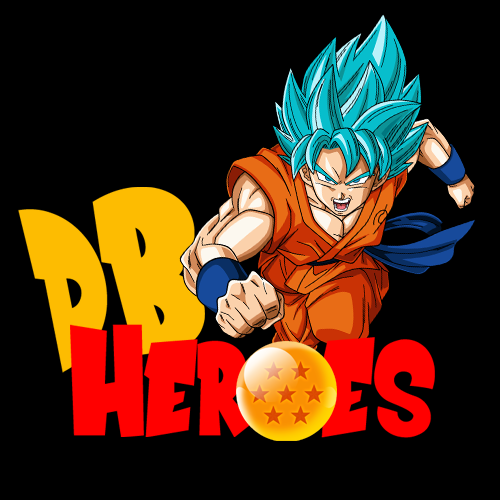
<style>
.page{position:relative;width:500px;height:500px;background:#000000}
.page>*{position:absolute;margin:0}
.t1{font:238.3px "SaiyanSans";color:#fdbc01}
.t2{font:160.2px "SaiyanSans";color:#ff0000}
.t3{font:163.7px "SaiyanSans";color:#ff0000}
</style>
<div class="page">
<p class="t1" style="left:18px;top:187px;width:187px;height:186px;rotate:-11deg">DB</p>
<p class="t2" style="left:70px;top:324px;width:182px;height:113px">Her</p>
<p class="t3" style="left:320px;top:337px;width:115px;height:101px">es</p>
</div>
